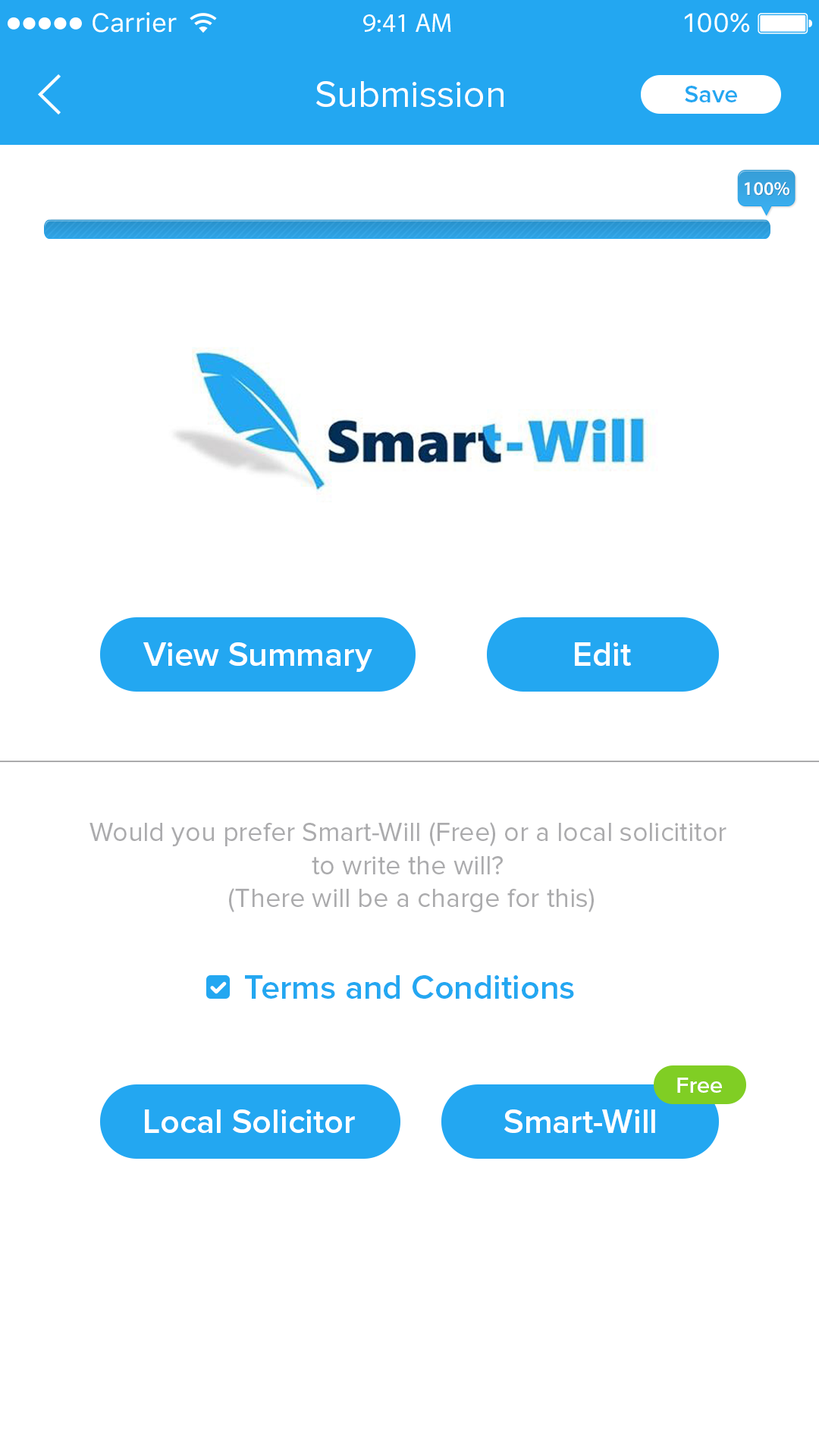
<style>
.page{position:relative;width:819px;height:1456px;background:#ffffff}
.page>*{position:absolute;margin:0}
.t1{font:38.1px "ProximaNova-Regular";color:#ffffff}
.t2{font:24.7px "ProximaNova-Semibold";color:#23a7f1}
.t3{font:19.2px "MyriadPro-Semibold";color:#ffffff}
.t4{font:34.1px "ProximaNova-Semibold";color:#ffffff}
.t5{font:27.3px "ProximaNova-Regular";color:#ababad}
.t6{font:34.1px "ProximaNova-Semibold";color:#23a7f1}
.t7{font:22.7px "ProximaNova-Semibold";color:#ffffff}
</style>
<div class="page">
<p class="t1" style="left:316px;top:81px;width:188px;height:26px">Submission</p>
<p class="t2" style="left:685px;top:86px;width:52px;height:16px">Save</p>
<p class="t3" style="left:745px;top:182px;width:44px;height:14px">100%</p>
<p class="t4" style="left:143px;top:642px;width:229px;height:30px">View Summary</p>
<p class="t4" style="left:575px;top:642px;width:56px;height:24px">Edit</p>
<p class="t5" style="left:89px;top:822px;width:637px;height:90px;text-align:center">Would you prefer Smart-Will (Free) or a local solicititor <br>to write the will? <br>(There will be a charge for this)</p>
<p class="t6" style="left:245px;top:975px;width:329px;height:24px">Terms and Conditions</p>
<p class="t7" style="left:677px;top:1078px;width:45px;height:15px">Free</p>
<p class="t4" style="left:145px;top:1109px;width:210px;height:24px">Local Solicitor</p>
<p class="t4" style="left:504px;top:1109px;width:151px;height:24px">Smart-Will</p>
</div>
